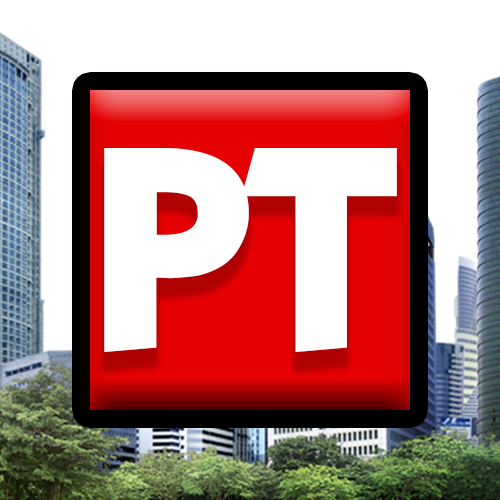
<style>
.page{position:relative;width:500px;height:500px;background:#ffffff}
.page>*{position:absolute;margin:0}
.t1{font:248.5px "KabelBook";letter-spacing:-0.1em;color:#ffffff}
</style>
<div class="page">
<p class="t1" style="left:104px;top:148px;width:293px;height:204px">PT</p>
</div>
